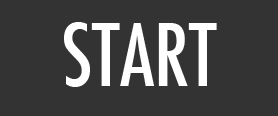
<style>
.page{position:relative;width:278px;height:116px;background:#333333}
.page>*{position:absolute;margin:0}
.t1{font:84px "Futura-CondensedMedium";color:#ffffff}
</style>
<div class="page">
<p class="t1" style="left:64px;top:22px;width:153px;height:65px">START</p>
</div>
